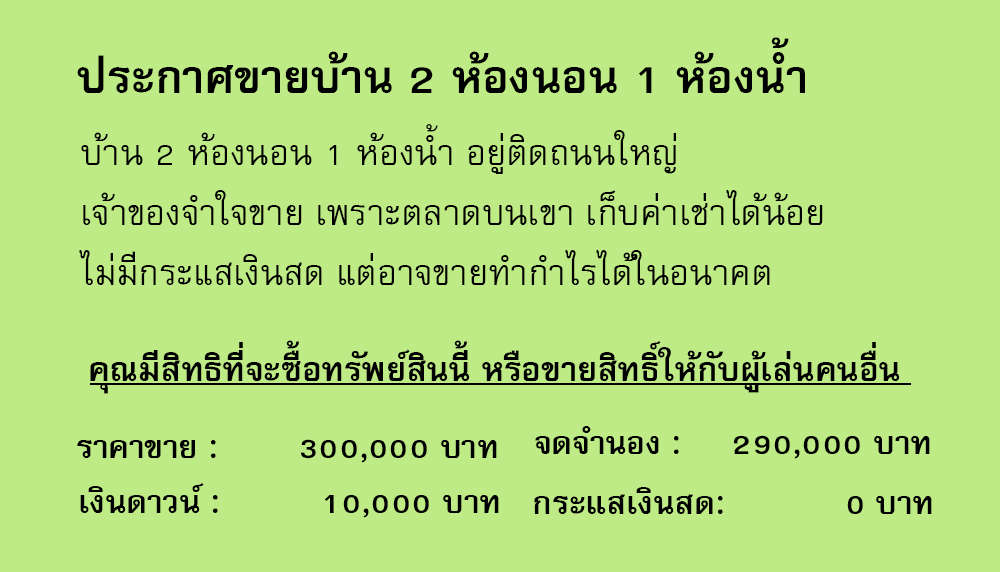
<style>
.page{position:relative;width:1000px;height:572px;background:#beeb85}
.page>*{position:absolute;margin:0}
.t1{font:64px "FreesiaUPCBold";color:#000000}
.t2{font:50px/60px "FreesiaUPC";color:#000000}
.t3{font:47px "FreesiaUPCBold";color:#000000}
.t4{font:45px "FreesiaUPCBold";color:#000000}
</style>
<div class="page">
<p class="t1" style="left:77px;top:37px;width:728px;height:56px">ประกาศขายบ้าน 2 ห้องนอน 1 ห้องน้ำ</p>
<p class="t2" style="left:79px;top:124px;width:744px;height:161px">บ้าน 2 ห้องนอน 1 ห้องน้ำ อยู่ติดถนนใหญ่<br>เจ้าของจำใจขาย เพราะตลาดบนเขา เก็บค่าเช่าได้น้อย<br>ไม่มีกระแสเงินสด แต่อาจขายทำกำไรได้ในอนาคต</p>
<p class="t3" style="left:90px;top:340px;width:810px;height:54px">คุณมีสิทธิที่จะซื้อทรัพย์สินนี้ หรือขายสิทธิ์ให้กับผู้เล่นคนอื่น</p>
<p class="t4" style="left:535px;top:426px;width:395px;height:33px">จดจำนอง :     290,000 บาท</p>
<p class="t4" style="left:77px;top:439px;width:420px;height:24px">ราคาขาย :        300,000 บาท</p>
<p class="t4" style="left:80px;top:482px;width:419px;height:36px">เงินดาวน์ :          10,000 บาท</p>
<p class="t4" style="left:534px;top:487px;width:398px;height:27px">กระแสเงินสด:            0 บาท</p>
</div>
